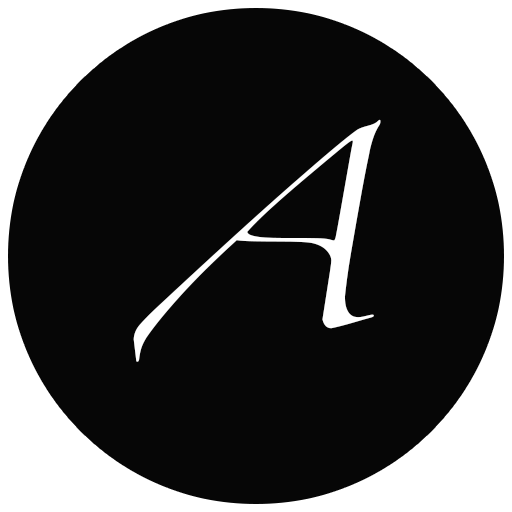
<style>
.page{position:relative;width:512px;height:512px;background:#060606}
.page>*{position:absolute;margin:0}
.t1{font:176px "Zapfino";color:#ffffff}
</style>
<div class="page">
<p class="t1" style="left:133px;top:119px;width:248px;height:243px">A</p>
</div>
